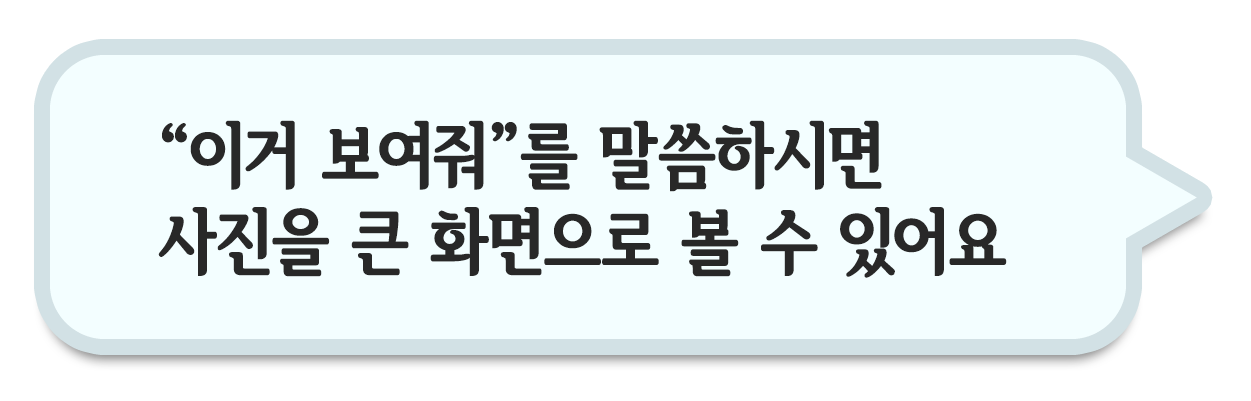
<style>
.page{position:relative;width:1251px;height:401px;background:#f3feff}
.page>*{position:absolute;margin:0}
.t1{font:72px "SeoulHangangCBL";color:#282828}
</style>
<div class="page">
<p class="t1" style="left:158px;top:120px;width:849px;height:158px">“이거 보여줘”를 말씀하시면 <br>사진을 큰 화면으로 볼 수 있어요</p>
</div>
